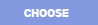
<style>
.page{position:relative;width:98px;height:25px;background:#8299df}
.page>*{position:absolute;margin:0}
.t1{font:18.2px "Arial-Black";color:#ffffff;scale:0.9 1}
</style>
<div class="page">
<p class="t1" style="left:24px;top:9px;width:45px;height:8px">CHOOSE</p>
</div>
